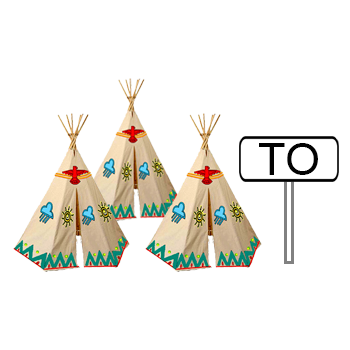
<style>
.page{position:relative;width:350px;height:350px;background:#ffffff}
.page>*{position:absolute;margin:0}
.t1{font:44.8px "ArialMT";color:#020202}
</style>
<div class="page">
<p class="t1" style="left:259px;top:143px;width:59px;height:32px">TO</p>
</div>
